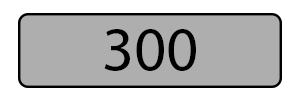
<style>
.page{position:relative;width:300px;height:100px;background:#afaeae}
.page>*{position:absolute;margin:0}
.t1{font:62.5px "MyriadPro-Regular";color:#000000}
</style>
<div class="page">
<p class="t1" style="left:104px;top:29px;width:92px;height:42px">300</p>
</div>
